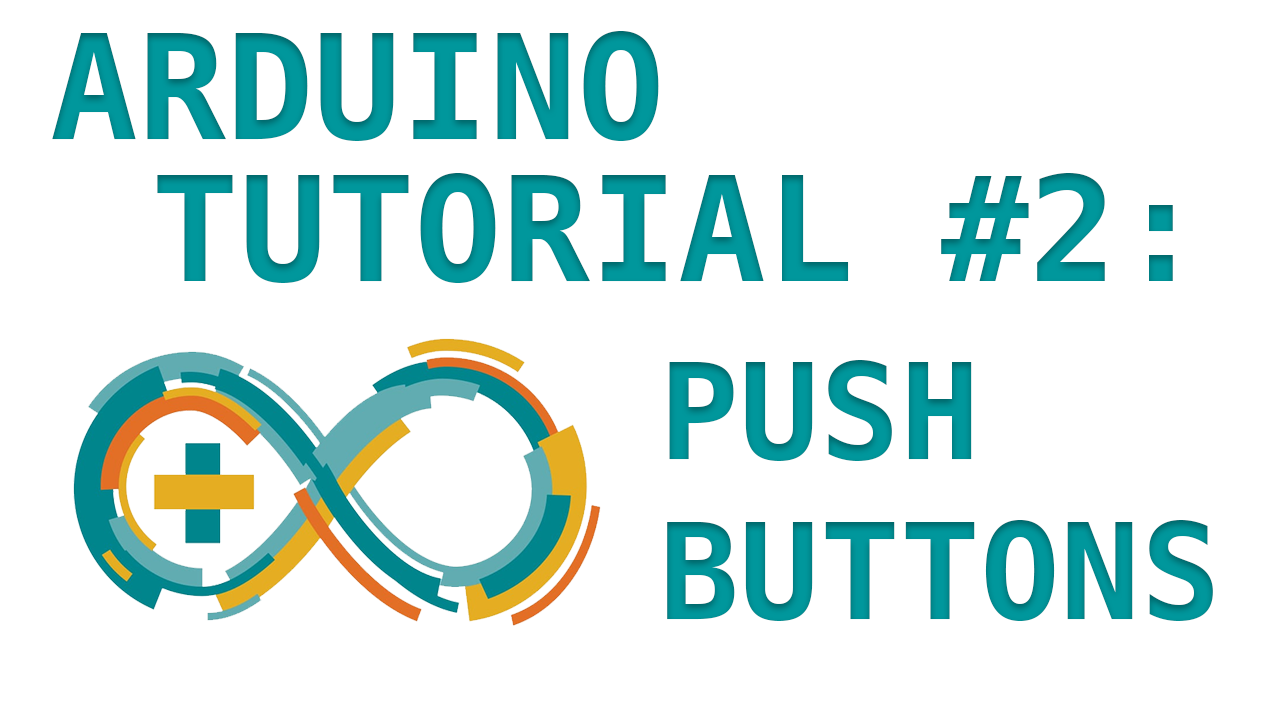
<style>
.page{position:relative;width:1280px;height:720px;background:#ffffff}
.page>*{position:absolute;margin:0}
.t1{font:145.8px "Menlo-Bold";color:#00979c}
.t2{font:133.3px "Menlo-Bold";color:#00979c}
</style>
<div class="page">
<p class="t1" style="left:52px;top:31px;width:607px;height:110px">ARDUINO</p>
<p class="t1" style="left:157px;top:173px;width:1016px;height:110px">TUTORIAL #2:</p>
<p class="t2" style="left:667px;top:360px;width:546px;height:261px">PUSH<br>BUTTONS</p>
</div>
